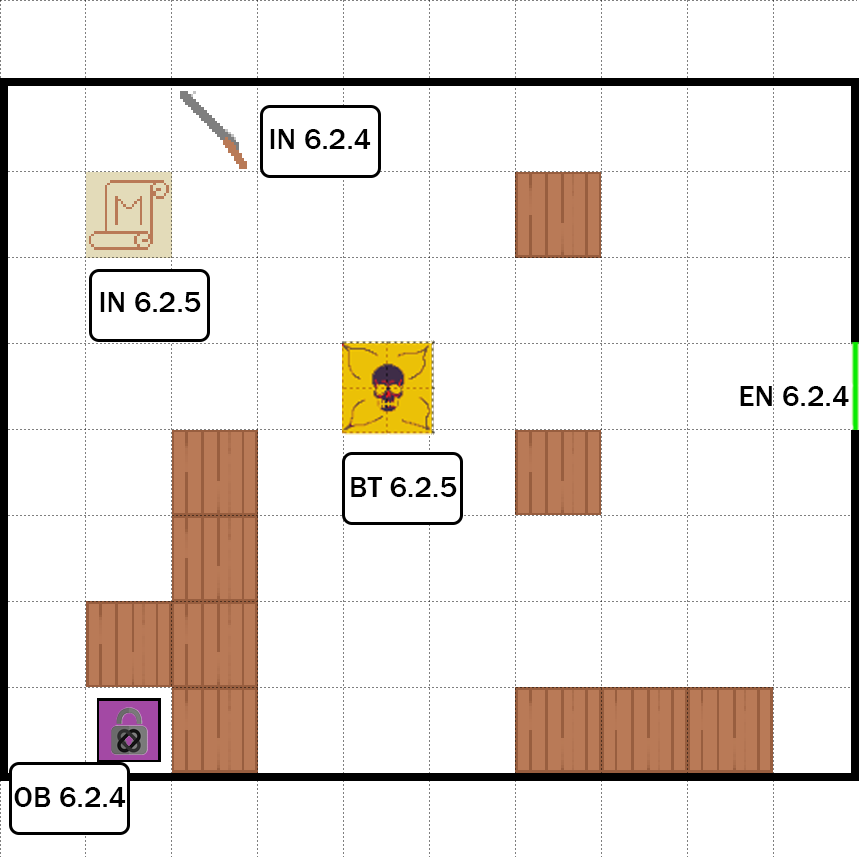
<style>
.page{position:relative;width:859px;height:859px;background:#ffffff}
.page>*{position:absolute;margin:0}
.t1{font:30.1px "FranklinGothic-Medium";color:#000000}
</style>
<div class="page">
<p class="t1" style="left:270px;top:129px;width:101px;height:20px">IN 6.2.4</p>
<p class="t1" style="left:100px;top:292px;width:101px;height:20px">IN 6.2.5</p>
<p class="t1" style="left:740px;top:386px;width:109px;height:20px">EN 6.2.4</p>
<p class="t1" style="left:351px;top:477px;width:106px;height:20px">BT 6.2.5</p>
<p class="t1" style="left:14px;top:787px;width:112px;height:20px">OB 6.2.4</p>
</div>
